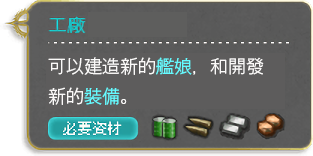
<style>
.page{position:relative;width:313px;height:156px;background:#5d5c5c}
.page>*{position:absolute;margin:0}
.t1{font:18px/30px "GothicMB101Pr6N-Light";color:#fbfaf9}
.t2{font:18px/30px "GothicMB101Pr6N-Light";color:#64fbff}
</style>
<div class="page">
<p class="t1" style="left:48px;top:57px;width:216px;height:48px">可以建造新的<span class="t2">艦娘</span>，和開發<br>新的<span class="t2">裝備</span>。</p>
</div>
